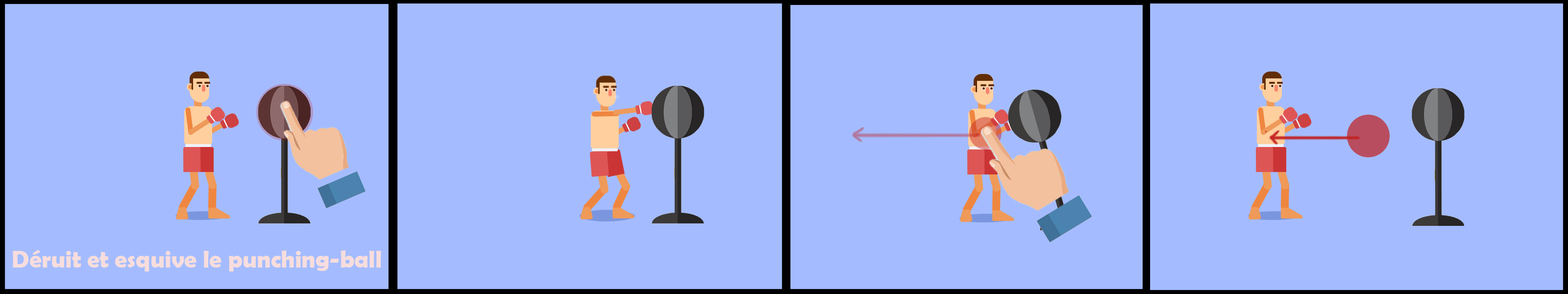
<style>
.page{position:relative;width:1568px;height:294px;background:#a4bcff}
.page>*{position:absolute;margin:0}
.t1{font:24.5px "BerlinSansFBDemi-Bold";color:#f7dddd}
</style>
<div class="page">
<p class="t1" style="left:13px;top:250px;width:368px;height:21px">Déruit et esquive le punching-ball</p>
</div>
